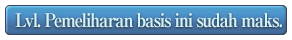
<style>
.page{position:relative;width:292px;height:40px;background:#ffffff}
.page>*{position:absolute;margin:0}
.t1{font:19px "RyuminPro-ExBold";letter-spacing:-0.08em;color:#d1f3fb;scale:0.9 1}
</style>
<div class="page">
<p class="t1" style="left:15px;top:13px;width:267px;height:15px">Lvl. Pemeliharan basis ini sudah maks.</p>
</div>
